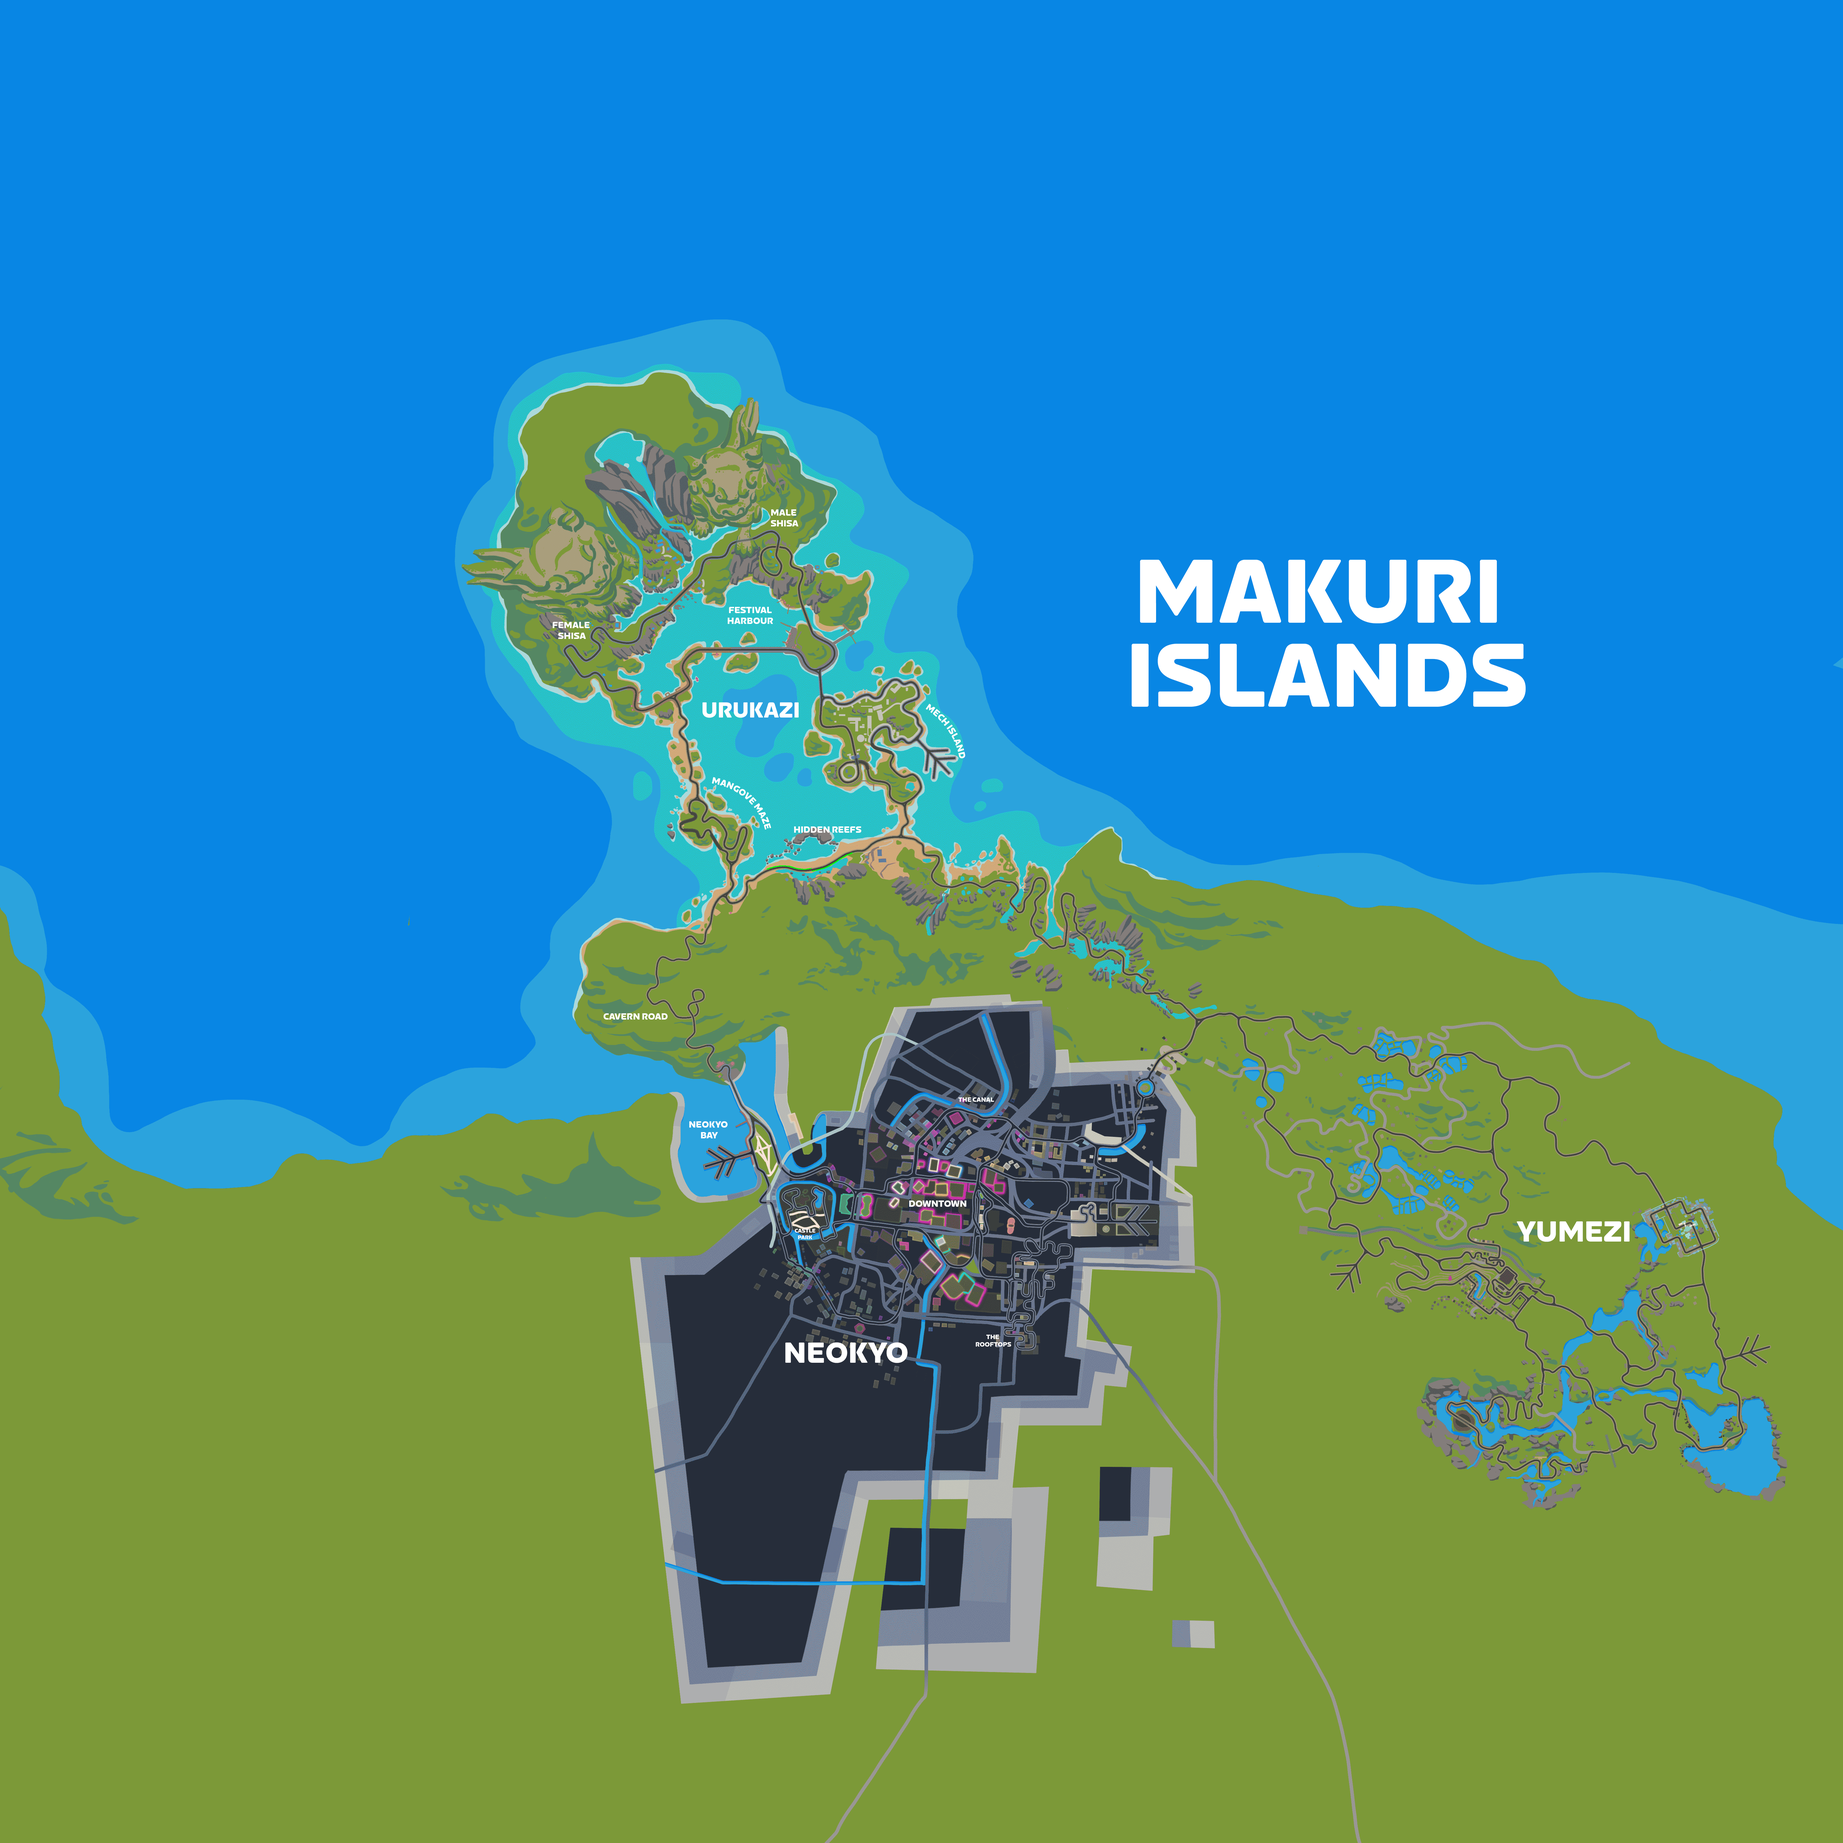
<style>
.page{position:relative;width:1843px;height:1843px;background:#0886e4}
.page>*{position:absolute;margin:0}
.t1{font:9px "ZwiftSprint-Bold";color:#ffffff}
.t2{font:21.6px "ZwiftSprint-Bold";color:#ffffff}
.t3{font:6.3px "ZwiftSprint-Bold";color:#ffffff}
.t4{font:5.4px "ZwiftSprint-Bold";color:#ffffff}
.t5{font:28.8px "ZwiftSprint-Bold";color:#ffffff}
</style>
<div class="page">
<p class="t1" style="left:771px;top:509px;width:28px;height:17px;text-align:center">MALE <br>SHISA</p>
<p class="t1" style="left:728px;top:607px;width:45px;height:17px;text-align:center">FESTIVAL<br>HARBOUR</p>
<p class="t1" style="left:553px;top:622px;width:37px;height:17px;text-align:center">FEMALE <br>SHISA</p>
<p class="t2" style="left:703px;top:702px;width:96px;height:16px">URUKAZI</p>
<p class="t1" style="left:926px;top:704px;width:39px;height:54px;rotate:-18deg">MECH ISLAND</p>
<p class="t1" style="left:712px;top:777px;width:59px;height:53px;rotate:6deg">MANGOVE MAZE</p>
<p class="t1" style="left:794px;top:826px;width:68px;height:7px">HIDDEN REEFS</p>
<p class="t1" style="left:604px;top:1013px;width:64px;height:7px">CAVERN ROAD</p>
<p class="t3" style="left:958px;top:1097px;width:36px;height:5px">THE CANAL</p>
<p class="t1" style="left:689px;top:1121px;width:39px;height:17px;text-align:center">NEOKYO <br>BAY</p>
<p class="t1" style="left:909px;top:1200px;width:58px;height:7px">DOWNTOWN</p>
<p class="t4" style="left:795px;top:1229px;width:20px;height:10px;text-align:center">CASTLE<br>PARK</p>
<p class="t5" style="left:1517px;top:1221px;width:113px;height:21px">YUMEZI</p>
<p class="t3" style="left:976px;top:1335px;width:35px;height:12px;text-align:center">THE <br>ROOFTOPS</p>
<p class="t5" style="left:785px;top:1342px;width:123px;height:21px">NEOKYO</p>
</div>
